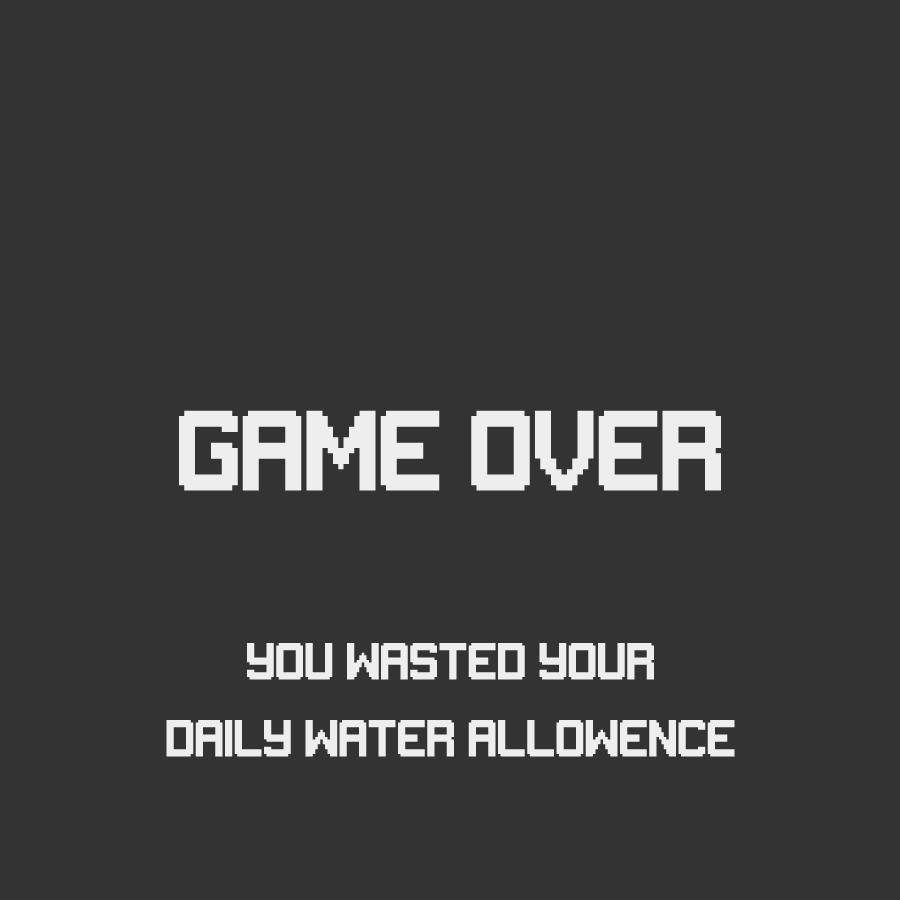
<style>
.page{position:relative;width:900px;height:900px;background:#333333}
.page>*{position:absolute;margin:0}
.t1{font:85px "Gameplay";color:#eeeeee}
.t2{font:39px/77px "Gameplay";color:#eeeeee}
</style>
<div class="page">
<p class="t1" style="left:179px;top:410px;width:542px;height:81px">GAME OVER</p>
<p class="t2" style="left:166px;top:643px;width:569px;height:114px;text-align:center">You wasted your<br>daily water allowence</p>
</div>
